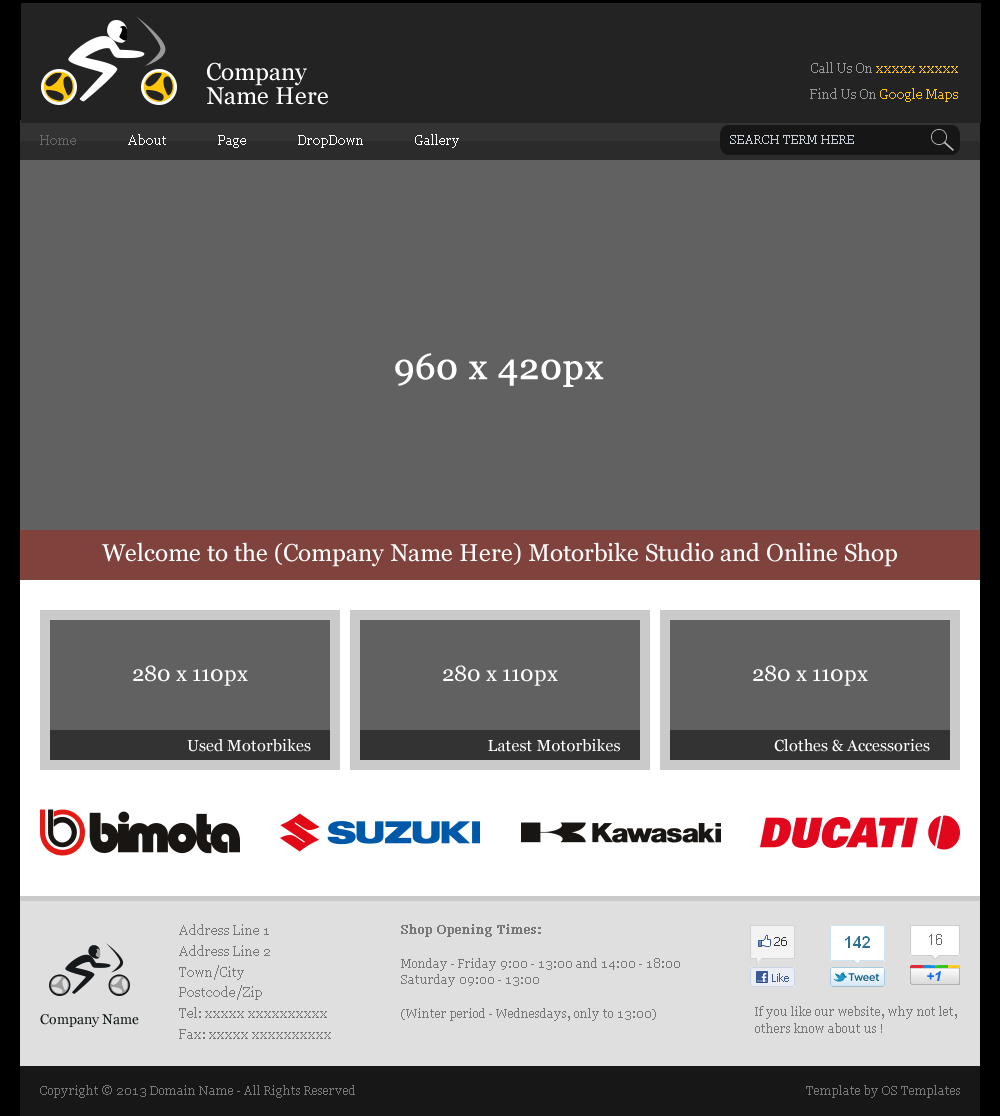
<style>
.page{position:relative;width:1000px;height:1116px;background:#616161}
.page>*{position:absolute;margin:0}
.t1{font:24px/24px "Georgia";color:#ffffff}
.t2{font:13px/26px "Georgia";color:#fdc507}
.t3{font:13px/26px "Georgia";color:#999999}
.t4{font:13px "Georgia";color:#676767}
.t5{font:13px "Georgia";color:#ffffff}
.t6{font:12px "Georgia";color:#c7ced6}
.t7{font:36px "Georgia";color:#ffffff;font-weight:bold}
.t8{font:24px "Georgia";color:#ffffff}
.t9{font:22px "Georgia";color:#ffffff}
.t10{font:16px "Georgia";color:#ffffff}
.t11{font:13px/20.8px "Georgia";color:#787878}
.t12{font:12px/16.8px "Georgia";color:#787878}
.t13{font:12px/16.8px "Georgia";color:#787878;font-weight:bold}
.t14{font:14px "Georgia";color:#14191a}
.t15{font:12px "Georgia";color:#787878}
</style>
<div class="page">
<p class="t1" style="left:206px;top:62px;width:122px;height:43px">Company<br>Name Here</p>
<p class="t2" style="left:810px;top:62px;width:148px;height:40px;text-align:right"><span class="t3">Call Us On </span>xxxxx xxxxx<br><span class="t3">Find Us On </span>Google Maps</p>
<p class="t4" style="left:40px;top:135px;width:36px;height:10px">Home</p>
<p class="t5" style="left:128px;top:134px;width:38px;height:11px">About</p>
<p class="t5" style="left:218px;top:135px;width:28px;height:13px">Page</p>
<p class="t5" style="left:298px;top:135px;width:65px;height:13px">DropDown</p>
<p class="t5" style="left:415px;top:134px;width:44px;height:14px">Gallery</p>
<p class="t6" style="left:730px;top:135px;width:124px;height:9px">SEARCH TERM HERE</p>
<p class="t7" style="left:395px;top:353px;width:209px;height:34px">960 x 420px</p>
<p class="t8" style="left:102px;top:542px;width:795px;height:25px">Welcome to the (Company Name Here) Motorbike Studio and Online Shop</p>
<p class="t9" style="left:133px;top:665px;width:115px;height:21px">280 x 110px</p>
<p class="t9" style="left:443px;top:665px;width:115px;height:21px">280 x 110px</p>
<p class="t9" style="left:753px;top:665px;width:115px;height:21px">280 x 110px</p>
<p class="t10" style="left:187px;top:739px;width:124px;height:13px">Used Motorbikes</p>
<p class="t10" style="left:488px;top:739px;width:132px;height:13px">Latest Motorbikes</p>
<p class="t10" style="left:774px;top:739px;width:156px;height:13px">Clothes &amp; Accessories</p>
<p class="t11" style="left:179px;top:924px;width:152px;height:115px">Address Line 1<br>Address Line 2<br>Town/City<br>Postcode/Zip<br>Tel: xxxxx xxxxxxxxxx<br>Fax: xxxxx xxxxxxxxxx</p>
<p class="t12" style="left:401px;top:924px;width:279px;height:97px"><span class="t13">Shop Opening Times:<br><br></span>Monday - Friday 9:00 - 13:00 and 14:00 - 18:00<br>Saturday 09:00 - 13:00<br><br>(Winter period - Wednesdays, only to 13:00)</p>
<p class="t14" style="left:40px;top:1014px;width:99px;height:13px">Company Name</p>
<p class="t12" style="left:755px;top:1006px;width:202px;height:27px">If you like our website, why not let, <br>others know about us !</p>
<p class="t15" style="left:40px;top:1085px;width:315px;height:13px">Copyright © 2013 Domain Name - All Rights Reserved</p>
<p class="t15" style="left:806px;top:1085px;width:154px;height:13px">Template by OS Templates</p>
</div>
